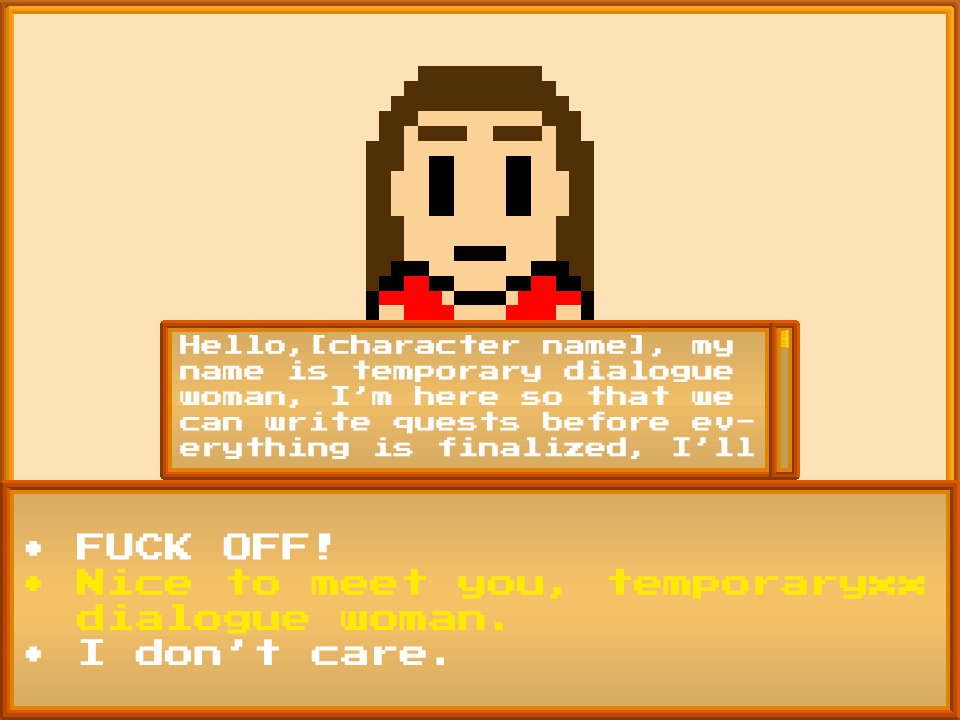
<style>
.page{position:relative;width:960px;height:720px;background:#fbe2b7}
.page>*{position:absolute;margin:0}
.t1{font:21.3px "PressStart2P";color:#ffffff}
.t2{font:29.3px "PressStart2P";color:#ffea02}
.t3{font:29.3px "PressStart2P";color:#ffffff}
</style>
<div class="page">
<p class="t1" style="left:180px;top:335px;width:574px;height:124px">Hello,[character name], my name is temporary dialogue woman, I’m here so that we can write quests before everything is finalized, I’ll be replaced at the end of development sadly.</p>
<p class="t2" style="left:25px;top:533px;width:900px;height:132px"><span class="t3">• FUCK OFF!<br></span>• Nice to meet you, temporaryxx    dialogue woman.<br><span class="t3">• I don’t care.</span></p>
</div>
